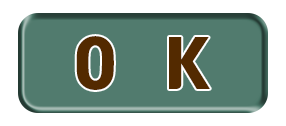
<style>
.page{position:relative;width:286px;height:126px;background:#517b6e}
.page>*{position:absolute;margin:0}
.t1{font:60px "TmonMonsoriBlack";letter-spacing:0.1em;color:#532a00}
</style>
<div class="page">
<p class="t1" style="left:76px;top:36px;width:134px;height:54px">O  K</p>
</div>
